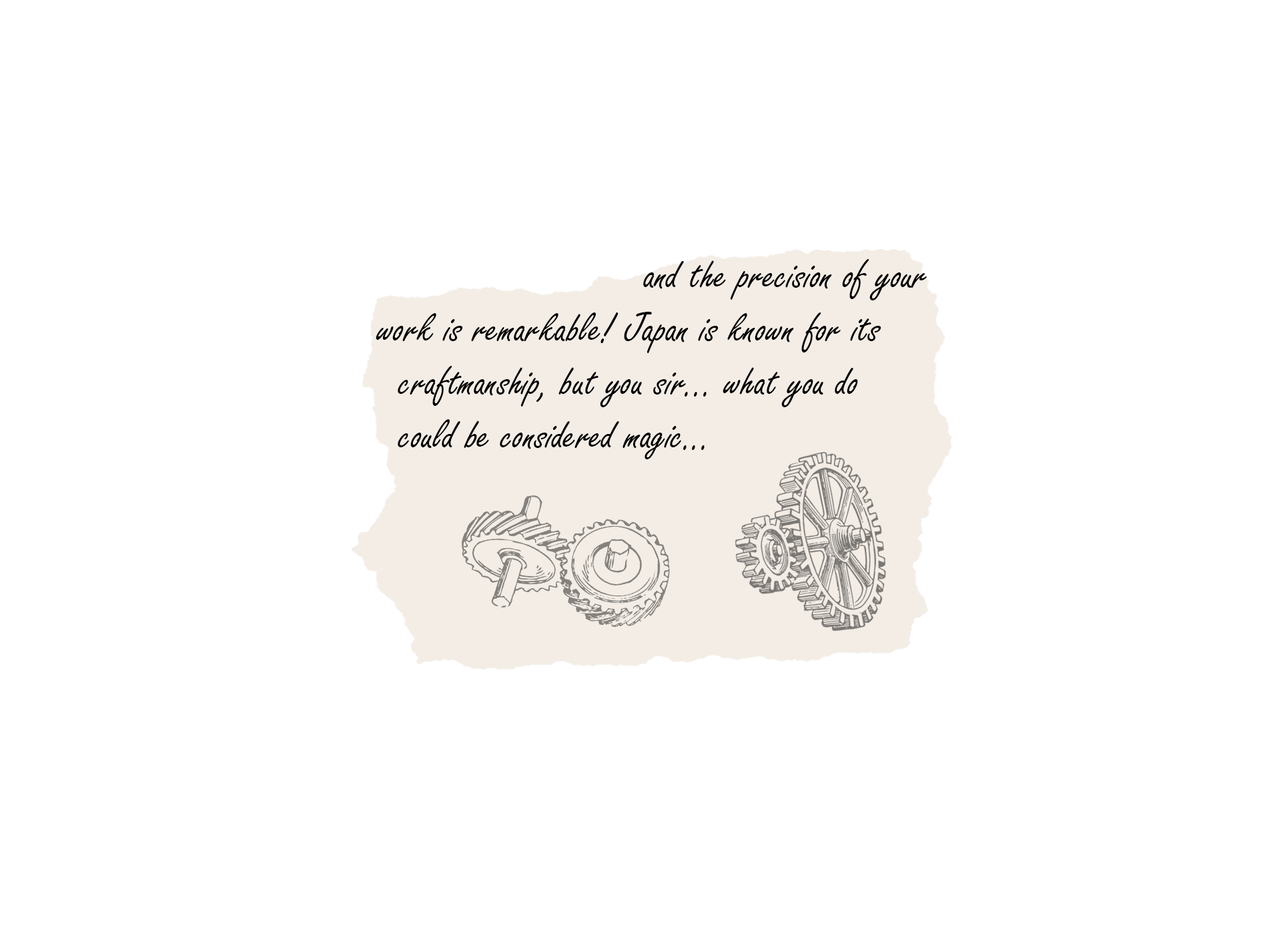
<style>
.page{position:relative;width:1261px;height:946px;background:#ffffff}
.page>*{position:absolute;margin:0}
.t1{font:44.5px "FreestyleScript-Regular";color:#000000}
</style>
<div class="page">
<p class="t1" style="left:376px;top:259px;width:551px;height:200px">and the precision of your<br>work is remarkable! Japan is known for its<br>  craftmanship, but you sir... what you do<br>  could be considered magic...</p>
</div>
